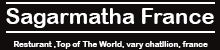
<style>
.page{position:relative;width:220px;height:50px;background:#110d0d}
.page>*{position:absolute;margin:0}
.t1{font:22px "ArialRoundedMTBold";color:#ffffff}
.t2{font:8px "ArialRoundedMTBold";color:#ffffff}
</style>
<div class="page">
<p class="t1" style="left:6px;top:8px;width:208px;height:20px">Sagarmatha France</p>
<p class="t2" style="left:14px;top:41px;width:194px;height:8px">Resturant ,Top of The World, vary chatllion, france</p>
</div>
